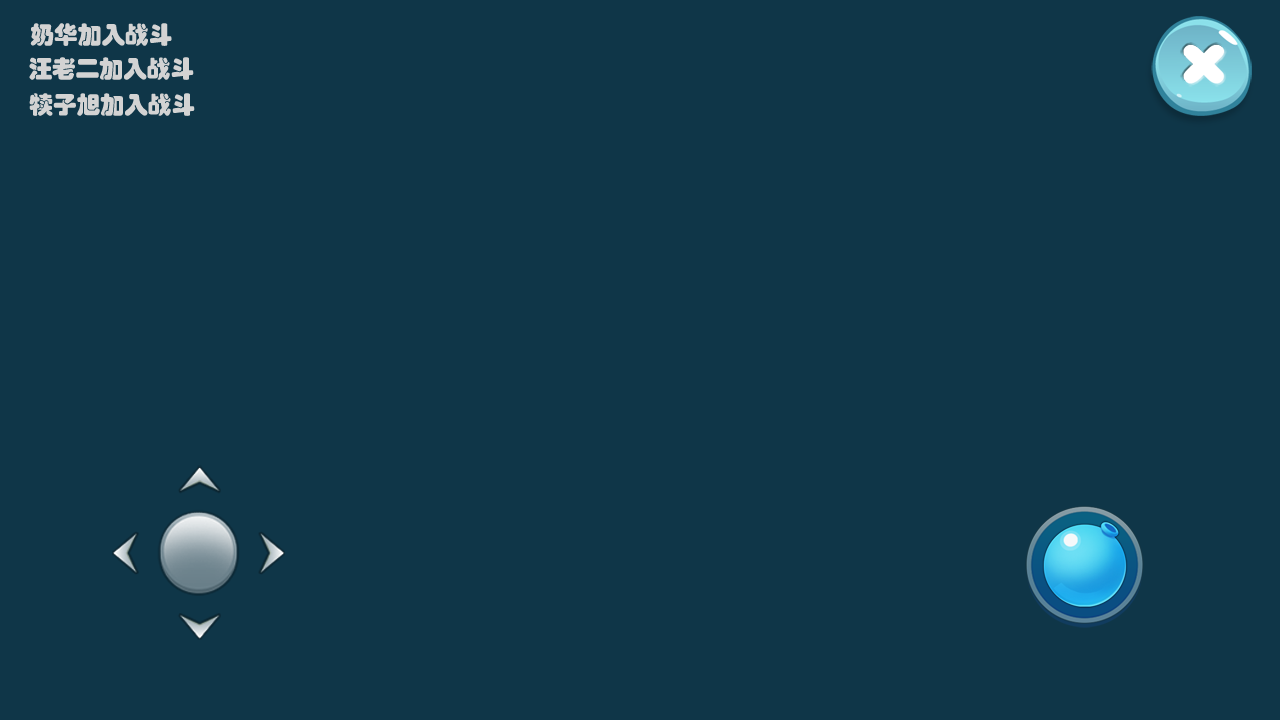
<style>
.page{position:relative;width:1280px;height:720px;background:#0f3648}
.page>*{position:absolute;margin:0}
.t1{font:24px "STHupo";color:#d3d3d3}
</style>
<div class="page">
<p class="t1" style="left:30px;top:23px;width:142px;height:23px">奶华加入战斗</p>
<p class="t1" style="left:29px;top:57px;width:165px;height:23px">汪老二加入战斗</p>
<p class="t1" style="left:29px;top:93px;width:166px;height:23px">犊子旭加入战斗</p>
</div>
